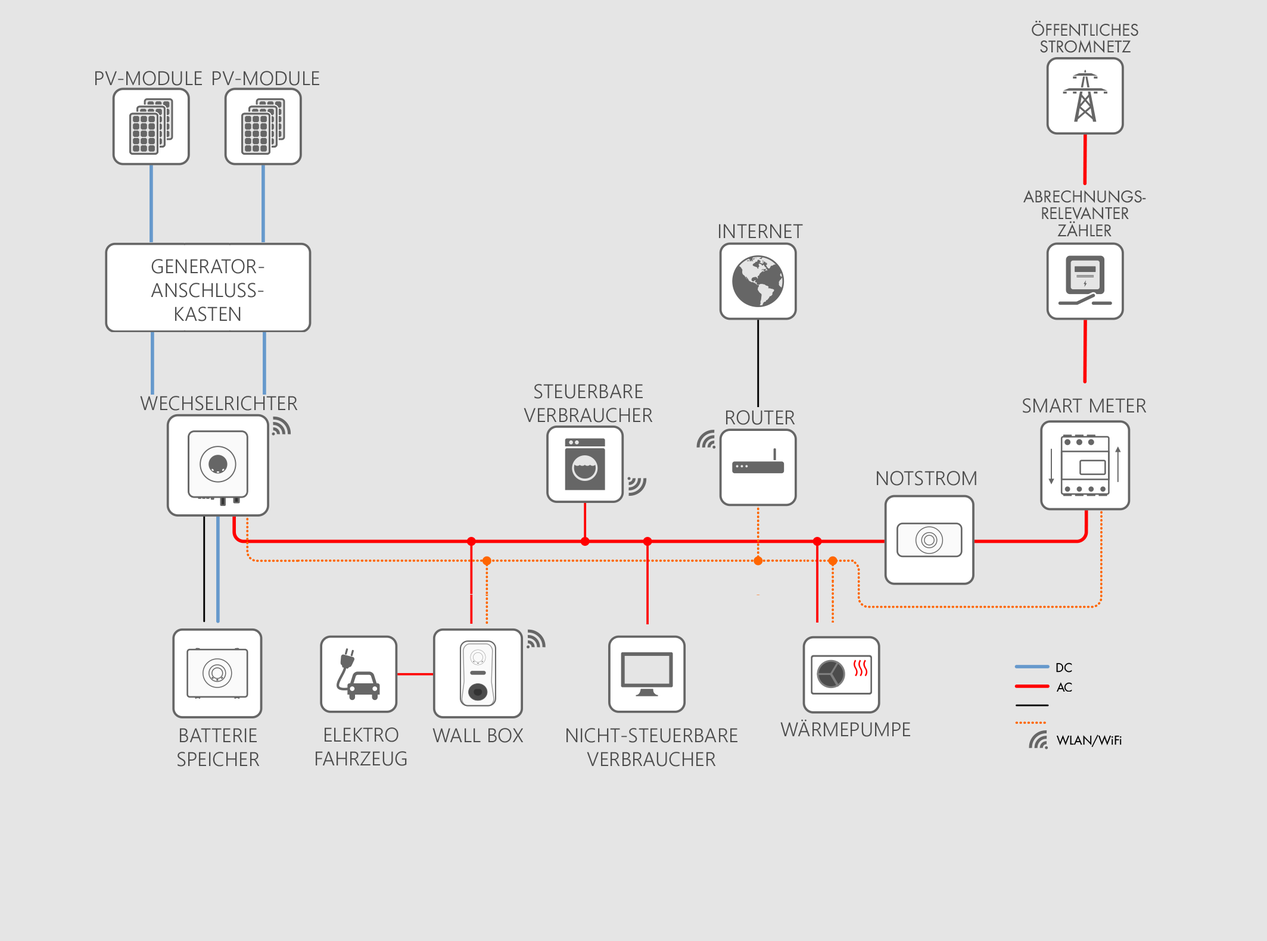
<style>
.page{position:relative;width:1267px;height:941px;background:#e5e5e5}
.page>*{position:absolute;margin:0}
.t1{font:19.8px "SegoeUI-Semilight";color:#4c4c4c}
</style>
<div class="page">
<p class="t1" style="left:95px;top:71px;width:107px;height:15px">PV-MODULE</p>
<p class="t1" style="left:213px;top:71px;width:106px;height:15px">PV-MODULE</p>
<p class="t1" style="left:719px;top:224px;width:84px;height:14px">INTERNET</p>
<p class="t1" style="left:151px;top:259px;width:113px;height:63px;text-align:center">GENERATOR-<br>ANSCHLUSS-<br>KASTEN</p>
<p class="t1" style="left:523px;top:384px;width:130px;height:39px;text-align:center">STEUERBARE<br>VERBRAUCHER</p>
<p class="t1" style="left:140px;top:396px;width:158px;height:15px">WECHSELRICHTER</p>
<p class="t1" style="left:1022px;top:398px;width:124px;height:15px">SMART METER</p>
<p class="t1" style="left:726px;top:410px;width:69px;height:15px">ROUTER</p>
<p class="t1" style="left:877px;top:471px;width:99px;height:15px">NOTSTROM</p>
<p class="t1" style="left:780px;top:720px;width:130px;height:17px">WÄRMEPUMPE</p>
<p class="t1" style="left:177px;top:728px;width:83px;height:39px;text-align:center">BATTERIE<br>SPEICHER</p>
<p class="t1" style="left:316px;top:728px;width:91px;height:38px;text-align:center">ELEKTRO<br>FAHRZEUG</p>
<p class="t1" style="left:432px;top:728px;width:91px;height:15px">WALL BOX</p>
<p class="t1" style="left:566px;top:728px;width:171px;height:39px;text-align:center">NICHT-STEUERBARE<br>VERBRAUCHER</p>
</div>
